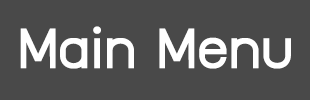
<style>
.page{position:relative;width:310px;height:100px;background:#494949}
.page>*{position:absolute;margin:0}
.t1{font:65px "supermarket";color:#ffffff;font-weight:bold}
</style>
<div class="page">
<p class="t1" style="left:20px;top:26px;width:271px;height:43px">Main Menu</p>
</div>
